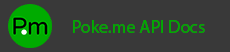
<style>
.page{position:relative;width:230px;height:52px;background:#393939}
.page>*{position:absolute;margin:0}
.t1{font:18px "MyriadPro-Regular";color:#00ab00}
</style>
<div class="page">
<p class="t1" style="left:73px;top:20px;width:132px;height:13px">Poke.me API Docs</p>
</div>
